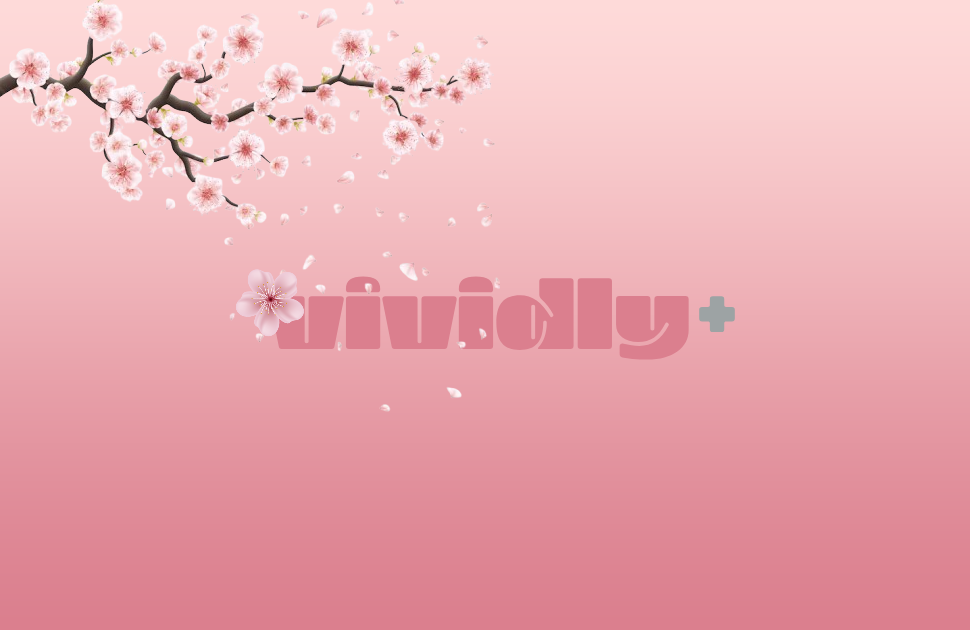
<style>
.page{position:relative;width:970px;height:630px}
.page>*{position:absolute;margin:0}
.t1{font:96px "ChumbTrial";color:#db7f8e}
.t2{font:96px "ChumbTrial";color:#9da3a4}
</style>
<div class="page">
<p class="t1" style="left:269px;top:276px;width:420px;height:84px">vividly</p>
<p class="t2" style="left:699px;top:296px;width:36px;height:37px">+</p>
</div>
